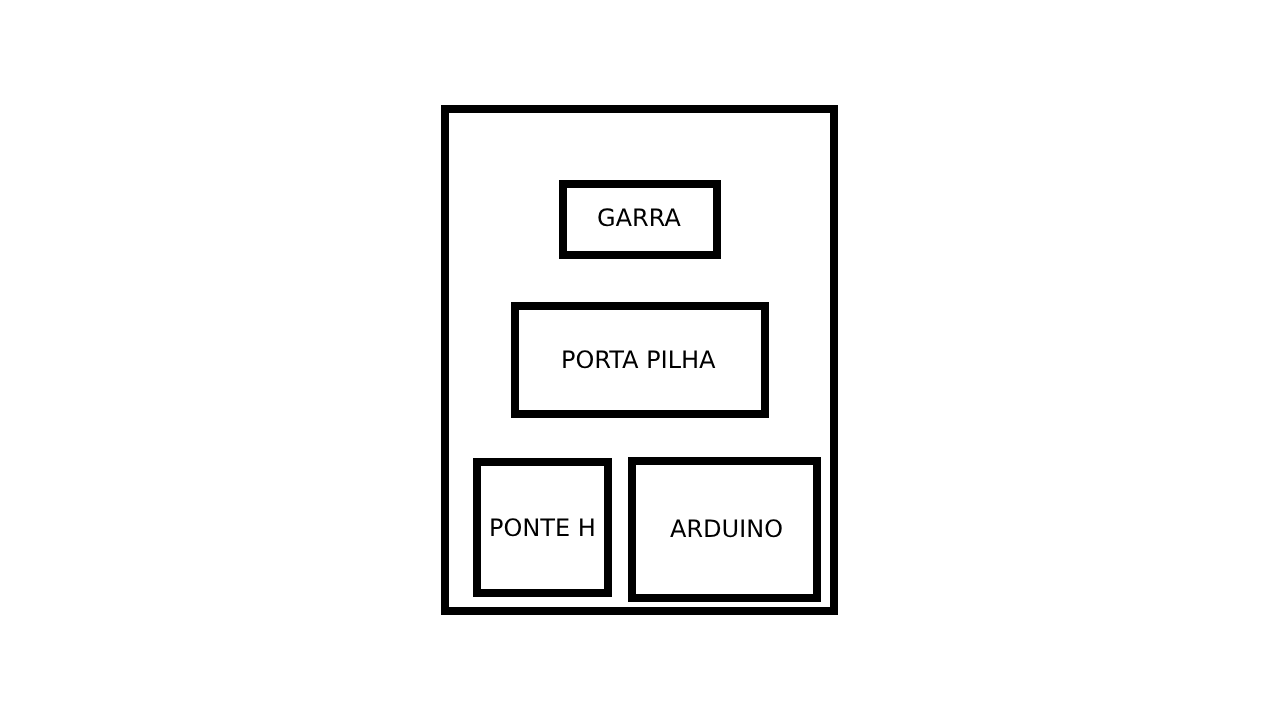
<style>
.page{position:relative;width:1280px;height:720px;background:#ffffff}
.page>*{position:absolute;margin:0}
.t1{font:24px "DejaVuSans";color:#000000}
</style>
<div class="page">
<p class="t1" style="left:598px;top:208px;width:83px;height:19px">GARRA</p>
<p class="t1" style="left:563px;top:350px;width:153px;height:19px">PORTA PILHA</p>
<p class="t1" style="left:491px;top:518px;width:103px;height:19px">PONTE H</p>
<p class="t1" style="left:670px;top:519px;width:112px;height:19px">ARDUINO</p>
</div>
